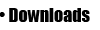
<style>
.page{position:relative;width:100px;height:30px;background:#ffffff}
.page>*{position:absolute;margin:0}
.t1{font:18px "Impact";color:#000000}
</style>
<div class="page">
<p class="t1" style="left:0px;top:8px;width:90px;height:14px">• Downloads</p>
</div>
